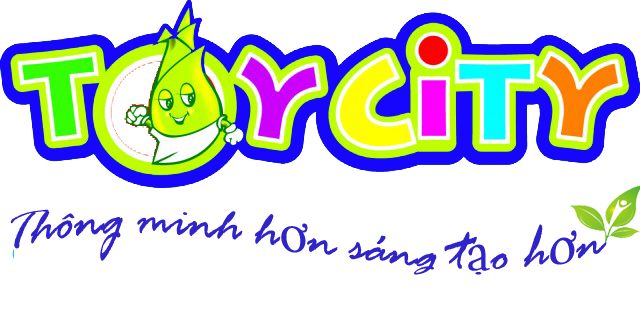
<style>
.page{position:relative;width:640px;height:313px;background:#ffffff}
.page>*{position:absolute;margin:0}
.t1{font:55px "RageItalic";color:#3024c8}
.t2{font:55px "MinionPro-Regular";color:#3024c8}
</style>
<div class="page">
<p class="t1" style="left:10px;top:209px;width:597px;height:66px">Thông minh h<span class="t2">ơ</span>n sáng t<span class="t2">ạ</span>o h<span class="t2">ơ</span>n</p>
</div>
